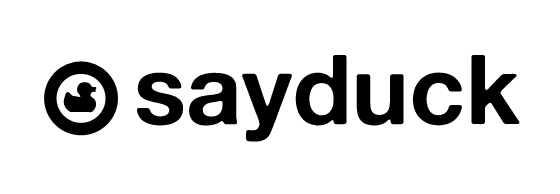
<style>
.page{position:relative;width:560px;height:194px;background:#ffffff}
.page>*{position:absolute;margin:0}
.t1{font:97.2px "AlteHaasGrotesk_Bold";color:#000000}
</style>
<div class="page">
<p class="t1" style="left:137px;top:55px;width:383px;height:87px">sayduck</p>
</div>
